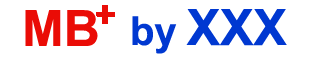
<style>
.page{position:relative;width:322px;height:60px;background:#ffffff}
.page>*{position:absolute;margin:0}
.t1{font:50px "Arial-BoldMT";color:#ea0c06}
.t2{font:50px "Arial-BoldMT";color:#0038d1}
.t3{font:40px "Arial-BoldMT";color:#0038d1}
</style>
<div class="page">
<p class="t1" style="left:25px;top:10px;width:73px;height:36px">MB</p>
<p class="t2" style="left:132px;top:9px;width:155px;height:45px"><span class="t3">by </span>XXX</p>
</div>
